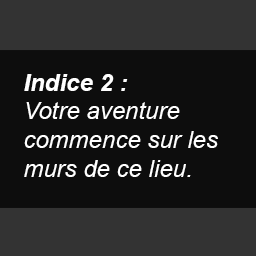
<style>
.page{position:relative;width:256px;height:256px;background:#0d0d0d}
.page>*{position:absolute;margin:0}
.t1{font:24px "Arial-ItalicMT";color:#ffffff}
.t2{font:24px "Arial-BoldItalicMT";color:#ffffff}
</style>
<div class="page">
<p class="t1" style="left:24px;top:74px;width:194px;height:103px"><span class="t2">Indice 2 :<br></span>Votre aventure<br>commence sur les<br>murs de ce lieu.</p>
</div>
